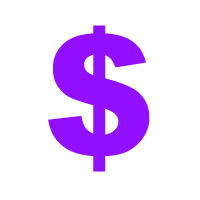
<style>
.page{position:relative;width:200px;height:200px;background:#ffffff}
.page>*{position:absolute;margin:0}
.t1{font:166.7px "Arial-Black";color:#930fff}
</style>
<div class="page">
<p class="t1" style="left:48px;top:25px;width:102px;height:147px">$</p>
</div>
